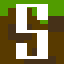
<style>
.page{position:relative;width:64px;height:64px;background:#583a00}
.page>*{position:absolute;margin:0}
.t1{font:71px "Pixeloza03";color:#ffffff;scale:3.29 1}
</style>
<div class="page">
<p class="t1" style="left:16px;top:4px;width:32px;height:55px">S</p>
</div>
